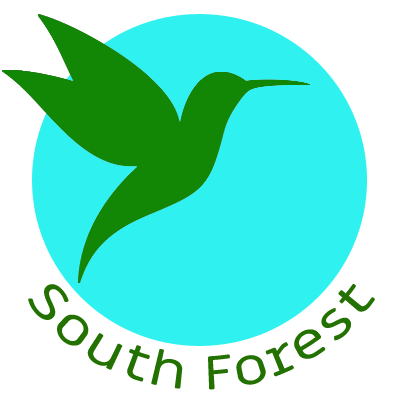
<style>
.page{position:relative;width:397px;height:397px;background:#2ff2f0}
.page>*{position:absolute;margin:0}
.t1{font:48px "MiriamLibre-Regular";color:#237201}
</style>
<div class="page">
<p class="t1" style="left:28px;top:284px;width:347px;height:106px">South Forest</p>
</div>
